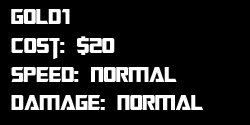
<style>
.page{position:relative;width:250px;height:125px;background:#000000}
.page>*{position:absolute;margin:0}
.t1{font:24px "TransformersMovie";color:#ffffff}
</style>
<div class="page">
<p class="t1" style="left:11px;top:9px;width:192px;height:101px">gold1<br>Cost: $20<br>Speed: Normal<br>Damage: Normal</p>
</div>
